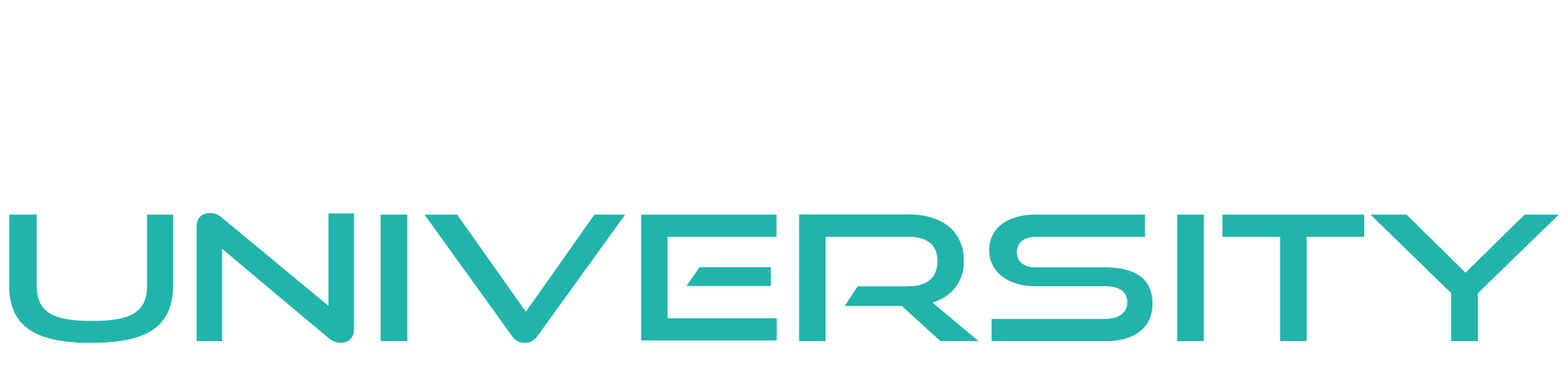
<style>
.page{position:relative;width:1568px;height:392px;background:#ffffff}
.page>*{position:absolute;margin:0}
.t1{font:173.8px "GoodTimesRg-Regular";color:#21b4ab;scale:1.2 1}
</style>
<div class="page">
<p class="t1" style="left:9px;top:212px;width:1550px;height:131px">university</p>
</div>
